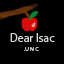
<style>
.page{position:relative;width:64px;height:64px;background:#000000}
.page>*{position:absolute;margin:0}
.t1{font:12px "MyriadPro-Regular";color:#d8d8d8}
.t2{font:6px "MyriadPro-Regular";color:#d8d8d8}
</style>
<div class="page">
<p class="t1" style="left:10px;top:33px;width:45px;height:9px">Dear Isac</p>
<p class="t2" style="left:24px;top:47px;width:15px;height:4px">.U N C</p>
</div>
